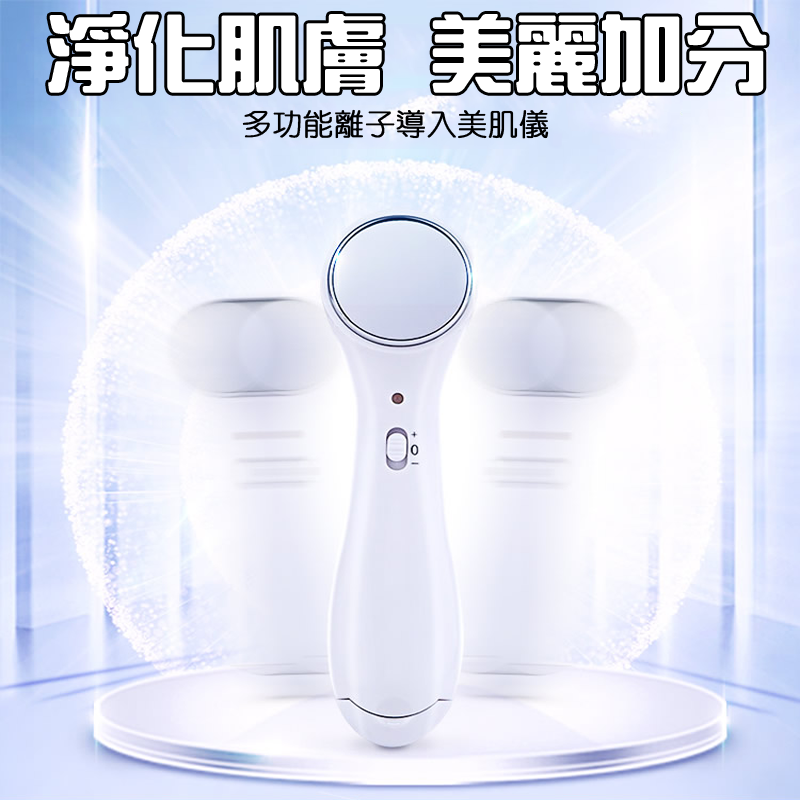
<style>
.page{position:relative;width:800px;height:800px}
.page>*{position:absolute;margin:0}
.t1{font:82.6px "HanWangZonYi";color:#ffffff;font-weight:bold}
.t2{font:30px "HanWangYenLight";color:#000000;font-weight:bold}
</style>
<div class="page">
<p class="t1" style="left:48px;top:14px;width:719px;height:79px">淨化肌膚 美麗加分</p>
<p class="t2" style="left:242px;top:109px;width:307px;height:30px">多功能離子導入美肌儀</p>
</div>
